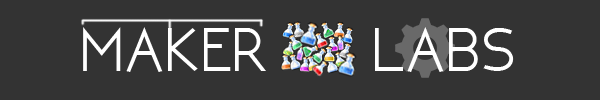
<style>
.page{position:relative;width:600px;height:100px;background:#333333}
.page>*{position:absolute;margin:0}
.t1{font:65px "NEOTERIC-Bold";color:#ffffff}
</style>
<div class="page">
<p class="t1" style="left:83px;top:27px;width:431px;height:45px">MAKER     LABS</p>
</div>
